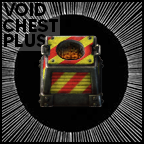
<style>
.page{position:relative;width:144px;height:144px}
.page>*{position:absolute;margin:0}
.t1{font:25.6px "MADETOMMY-Bold";color:#000000;font-variant:small-caps}
</style>
<div class="page">
<p class="t1" style="left:3px;top:3px;width:43px;height:13px">void</p>
<p class="t1" style="left:3px;top:19px;width:55px;height:13px">chest</p>
<p class="t1" style="left:4px;top:34px;width:42px;height:13px">plus</p>
</div>
